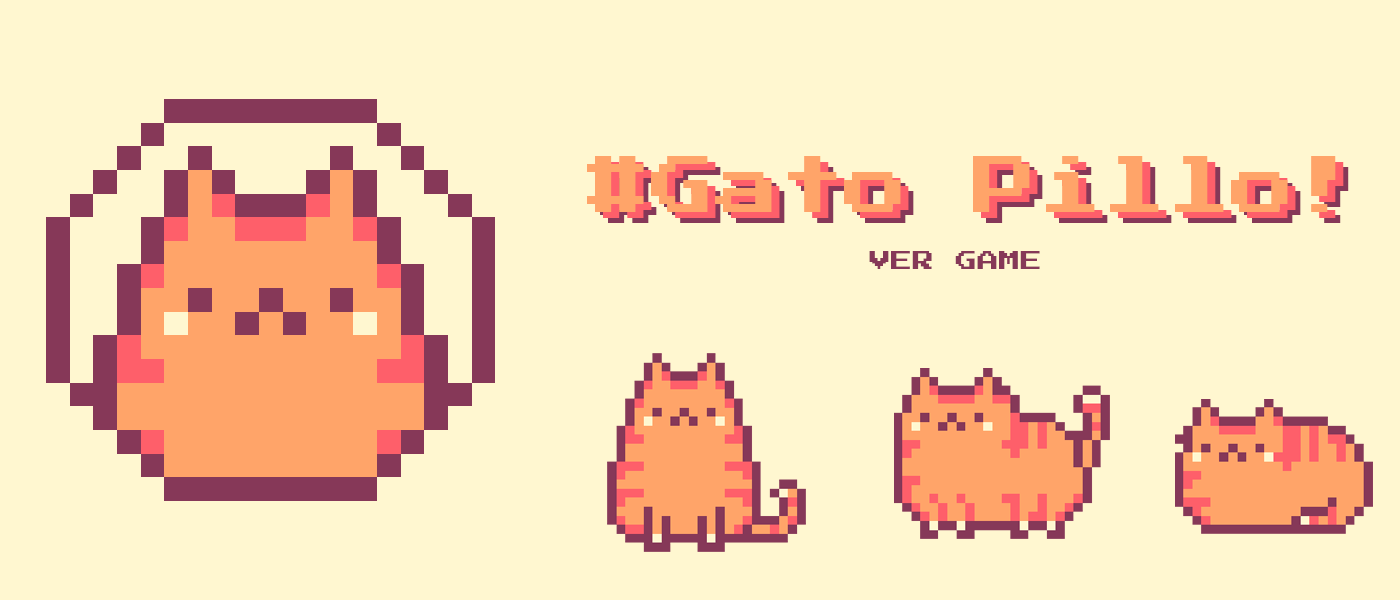
<style>
.page{position:relative;width:1400px;height:600px;background:#fff7d0}
.page>*{position:absolute;margin:0}
.t1{font:64.4px "PressStart2P-Regular";color:#ffa469}
.t2{font:64.4px "PressStart2P-Regular"}
.t3{font:21.6px "PressStart2P-Regular";color:#863858}
</style>
<div class="page">
<p class="t1" style="left:587px;top:156px;width:749px;height:56px">#Gato Pillo!</p>
<p class="t2" style="left:595px;top:162px;width:749px;height:56px">#Gato Pillo!</p>
<p class="t2" style="left:600px;top:167px;width:749px;height:56px">#Gato Pillo!</p>
<p class="t3" style="left:869px;top:251px;width:171px;height:18px">VER GAME</p>
</div>
